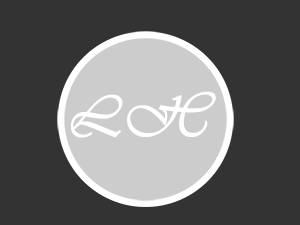
<style>
.page{position:relative;width:300px;height:225px;background:#333333}
.page>*{position:absolute;margin:0}
.t1{font:59px "Vivaldii";color:#ffffff;font-weight:bold}
</style>
<div class="page">
<p class="t1" style="left:71px;top:91px;width:145px;height:47px">LH</p>
</div>
